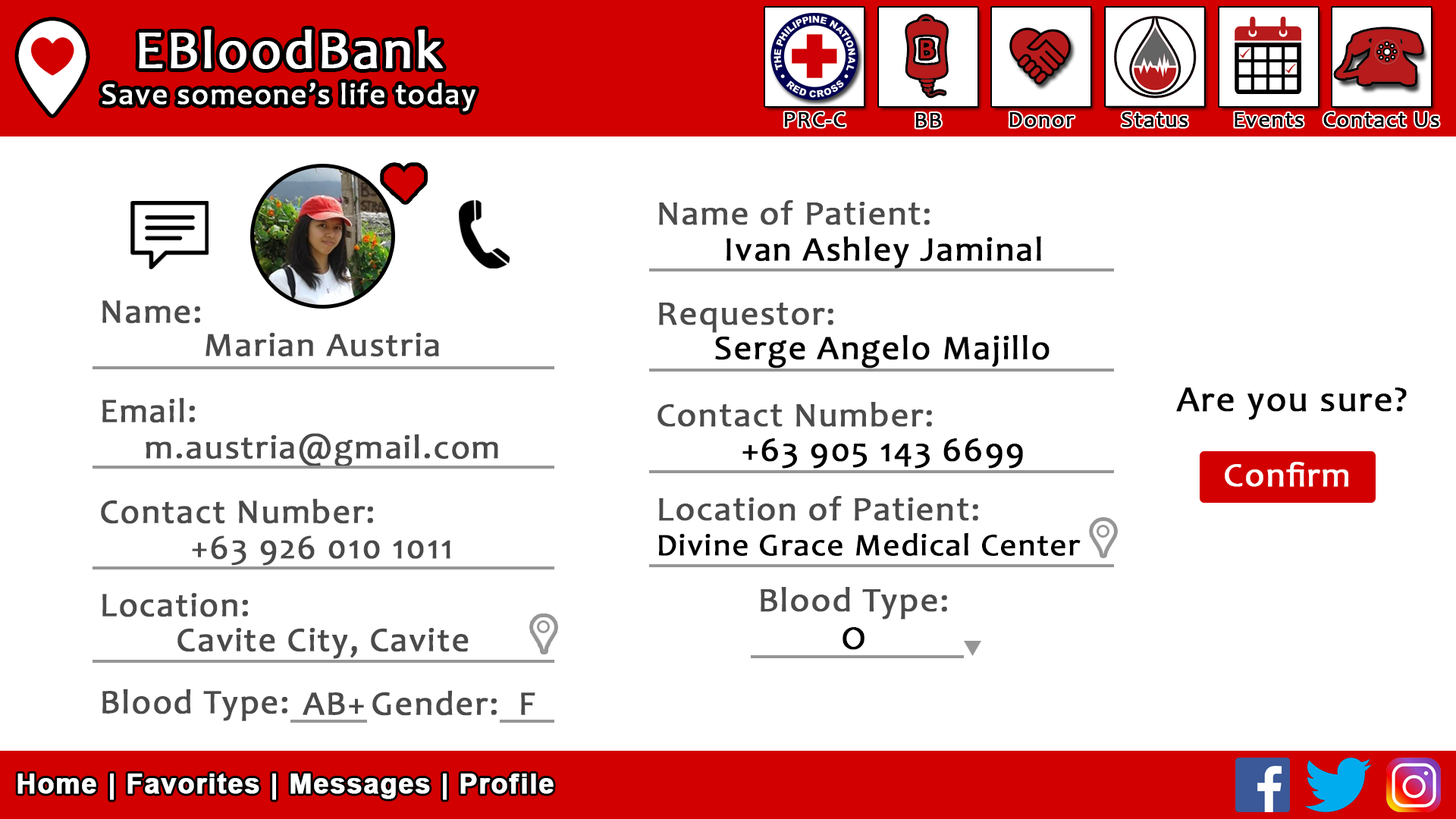
<style>
.page{position:relative;width:1456px;height:819px;background:#ffffff}
.page>*{position:absolute;margin:0}
.t1{font:30.3px "Candara";letter-spacing:0.03em;color:#ffffff;font-weight:bold}
.t2{font:54.6px "Candara";letter-spacing:0.03em;color:#ffffff;font-weight:bold}
.t3{font:22.7px "Candara";letter-spacing:0.03em;color:#000000;font-weight:bold}
.t4{font:34.5px "Candara";letter-spacing:0.03em;color:#4b4b4b;font-weight:bold}
.t5{font:34.3px "Candara";letter-spacing:0.03em;color:#000000;font-weight:bold}
.t6{font:34.3px "Candara";letter-spacing:0.03em;color:#4b4b4b;font-weight:bold}
.t7{font:34.1px "Candara";letter-spacing:0.03em;color:#4a4a4a;font-weight:bold}
.t8{font:36.4px "Candara";letter-spacing:0.03em;color:#000000;font-weight:bold}
.t9{font:34.3px "Candara";letter-spacing:0.03em;color:#ffffff;font-weight:bold}
.t10{font:31.6px "Candara";letter-spacing:0.03em;color:#000000;font-weight:bold}
.t11{font:34.3px "Candara";letter-spacing:0.03em;color:#4a4a4a;font-weight:bold}
.t12{font:34.5px "Candara";letter-spacing:0.03em;color:#000000;font-weight:bold}
.t13{font:27.3px "Arial-BoldMT";letter-spacing:0.03em;color:#ffffff;font-weight:bold}
</style>
<div class="page">
<p class="t1" style="left:102px;top:30px;width:373px;height:81px;text-align:center"><span class="t2">EBloodBank<br></span>Save someone’s life today</p>
<p class="t3" style="left:784px;top:112px;width:62px;height:15px">PRC-C</p>
<p class="t3" style="left:915px;top:113px;width:26px;height:15px">BB</p>
<p class="t3" style="left:1009px;top:112px;width:66px;height:15px">Donor</p>
<p class="t3" style="left:1122px;top:112px;width:66px;height:15px">Status</p>
<p class="t3" style="left:1235px;top:112px;width:69px;height:15px">Events</p>
<p class="t3" style="left:1323px;top:112px;width:116px;height:15px">Contact Us</p>
<p class="t4" style="left:659px;top:200px;width:271px;height:25px">Name of Patient:</p>
<p class="t5" style="left:726px;top:236px;width:315px;height:32px">Ivan Ashley Jaminal</p>
<p class="t6" style="left:102px;top:300px;width:98px;height:24px">Name:</p>
<p class="t4" style="left:659px;top:303px;width:174px;height:30px">Requestor:</p>
<p class="t7" style="left:206px;top:332px;width:233px;height:24px">Marian Austria</p>
<p class="t5" style="left:715px;top:334px;width:335px;height:35px">Serge Angelo Majillo</p>
<p class="t8" style="left:1176px;top:388px;width:231px;height:32px">Are you sure?</p>
<p class="t6" style="left:102px;top:397px;width:93px;height:26px">Email:</p>
<p class="t4" style="left:657px;top:402px;width:275px;height:25px">Contact Number:</p>
<p class="t7" style="left:146px;top:433px;width:352px;height:34px">m.austria@gmail.com</p>
<p class="t5" style="left:742px;top:438px;width:281px;height:31px">+63 905 143 6699</p>
<p class="t9" style="left:1225px;top:462px;width:123px;height:25px">Confirm</p>
<p class="t4" style="left:659px;top:496px;width:319px;height:25px">Location of Patient:</p>
<p class="t6" style="left:101px;top:498px;width:272px;height:26px">Contact Number:</p>
<p class="t10" style="left:659px;top:533px;width:422px;height:23px">Divine Grace Medical Center</p>
<p class="t7" style="left:192px;top:535px;width:258px;height:31px">+63 926 010 1011</p>
<p class="t6" style="left:102px;top:593px;width:146px;height:24px">Location:</p>
<p class="t4" style="left:761px;top:587px;width:186px;height:33px">Blood Type:</p>
<p class="t11" style="left:177px;top:628px;width:292px;height:31px">Cavite City, Cavite</p>
<p class="t12" style="left:842px;top:627px;width:22px;height:23px">O</p>
<p class="t6" style="left:102px;top:689px;width:185px;height:32px">Blood Type:</p>
<p class="t6" style="left:303px;top:692px;width:61px;height:23px">AB+</p>
<p class="t6" style="left:372px;top:690px;width:125px;height:26px">Gender:</p>
<p class="t6" style="left:521px;top:692px;width:14px;height:23px">F</p>
<p class="t13" style="left:17px;top:773px;width:537px;height:27px">Home | Favorites | Messages | Profile</p>
</div>
